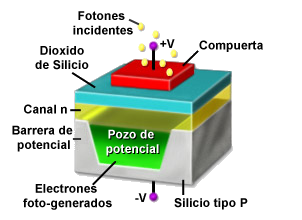
<style>
.page{position:relative;width:302px;height:220px;background:#ffffff}
.page>*{position:absolute;margin:0}
.t1{font:12px "Arial-BoldMT";letter-spacing:0.01em;color:#000000}
.t2{font:12px "Arial-BoldMT";letter-spacing:0.01em;color:#ffffff}
</style>
<div class="page">
<p class="t1" style="left:73px;top:11px;width:60px;height:24px;text-align:center">Fotones <br>incidentes</p>
<p class="t1" style="left:199px;top:40px;width:64px;height:12px">Compuerta</p>
<p class="t1" style="left:35px;top:46px;width:54px;height:24px;text-align:center">Dioxido<br>de Silicio</p>
<p class="t1" style="left:24px;top:104px;width:43px;height:10px">Canal n</p>
<p class="t1" style="left:12px;top:125px;width:61px;height:27px;text-align:center">Barrera de <br>potencial</p>
<p class="t2" style="left:106px;top:129px;width:53px;height:27px;text-align:center">Pozo de <br>potencial</p>
<p class="t1" style="left:23px;top:184px;width:89px;height:26px;text-align:center">Electrones <br>foto-generados</p>
<p class="t1" style="left:174px;top:198px;width:74px;height:12px">Silicio tipo P</p>
</div>
